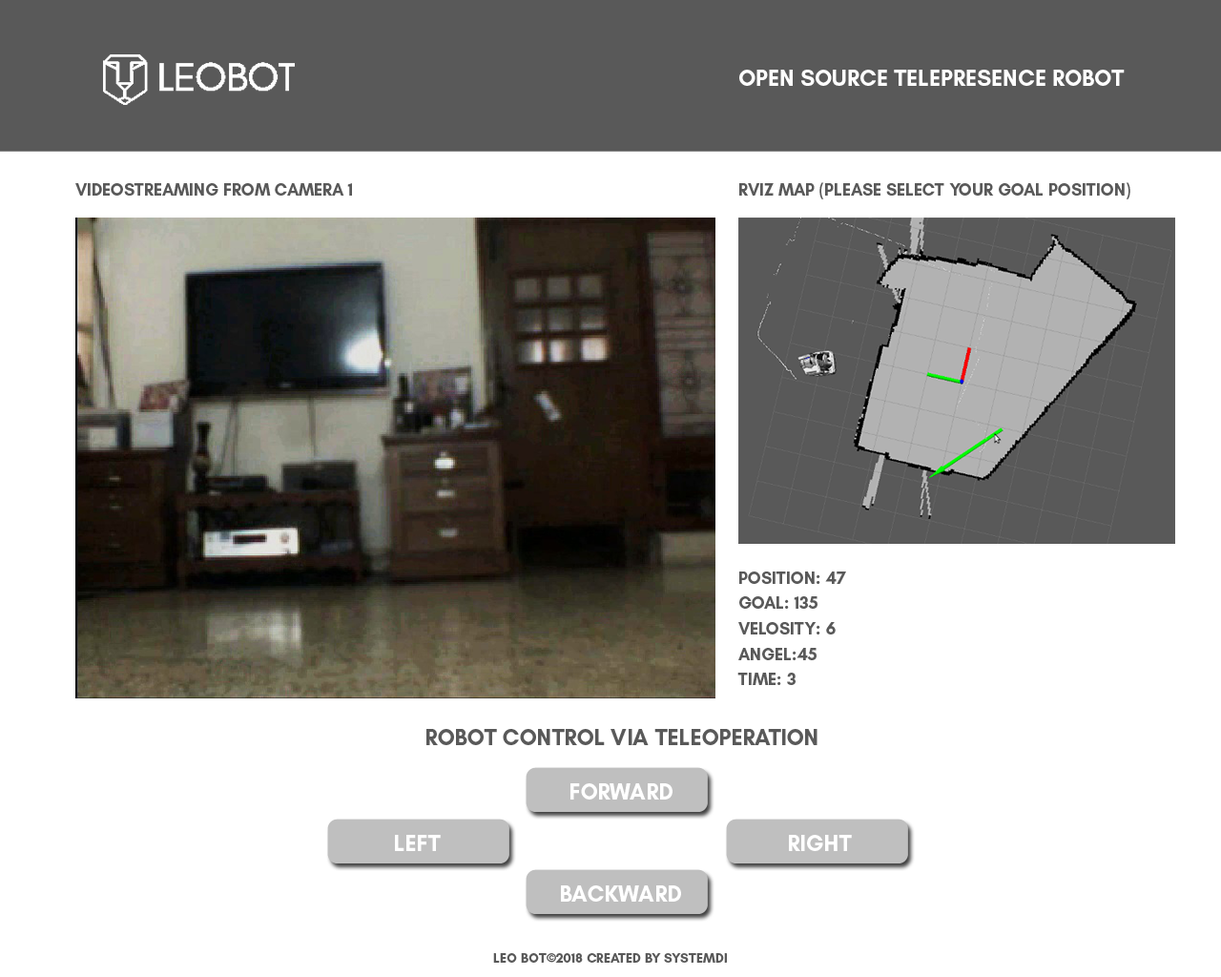
<style>
.page{position:relative;width:1221px;height:977px;background:#ffffff}
.page>*{position:absolute;margin:0}
.t1{font:22.9px "GlacialIndifference-Bold";color:#fdfdfd;text-transform:uppercase}
.t2{font:22.9px "GlacialIndifference-Regular";color:#fdfdfd;text-transform:uppercase}
.t3{font:17.2px "GlacialIndifference-Bold";color:#595959;text-transform:uppercase}
.t4{font:17.2px/25.4px "GlacialIndifference-Bold";color:#595959;text-transform:uppercase}
.t5{font:22.9px "GlacialIndifference-Bold";color:#595959;text-transform:uppercase}
.t6{font:22.9px "GlacialIndifference-Bold";color:#ffffff;text-transform:uppercase}
.t7{font:13.4px "GlacialIndifference-Bold";color:#595959;text-transform:uppercase}
</style>
<div class="page">
<p class="t1" style="left:739px;top:70px;width:386px;height:16px"><span class="t2"> </span>OPEN SOURCE telepresence robot</p>
<p class="t3" style="left:75px;top:183px;width:277px;height:13px">videostreaming from camera 1</p>
<p class="t3" style="left:739px;top:182px;width:391px;height:17px">RViz map (please select your goal position)</p>
<p class="t4" style="left:737px;top:571px;width:109px;height:114px">position: 47<br>GOAL: 135<br>Velosity: 6<br>Angel:45<br>TIME: 3</p>
<p class="t5" style="left:426px;top:729px;width:391px;height:16px">ROBOT CONTROL VIA TELEOPERATION</p>
<p class="t6" style="left:570px;top:783px;width:102px;height:16px">forward</p>
<p class="t6" style="left:395px;top:835px;width:46px;height:16px">LEFT</p>
<p class="t6" style="left:789px;top:835px;width:63px;height:16px">RIGHT</p>
<p class="t6" style="left:561px;top:885px;width:120px;height:16px">BACKWARd</p>
<p class="t7" style="left:493px;top:953px;width:234px;height:9px">LEO BOT©2018 Created by SYSTEMDI</p>
</div>
